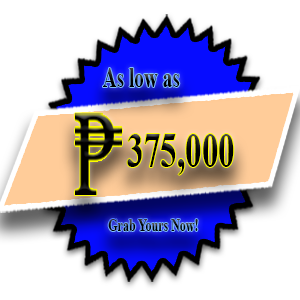
<style>
.page{position:relative;width:300px;height:300px;background:#ffffff}
.page>*{position:absolute;margin:0}
.t1{font:29.2px "TimesNewRomanPS-BoldMT";scale:0.66 1}
.t2{font:50.1px "TimesNewRomanPS-BoldMT";color:#000000;scale:0.66 1}
.t3{font:18.2px "TimesNewRomanPS-BoldMT";scale:0.66 1}
</style>
<div class="page">
<p class="t1" style="left:103px;top:68px;width:77px;height:19px">As low as</p>
<p class="t2" style="left:127px;top:134px;width:107px;height:41px">375,000</p>
<p class="t3" style="left:108px;top:219px;width:90px;height:12px">Grab Yours Now!</p>
</div>
